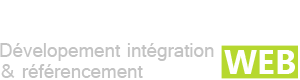
<style>
.page{position:relative;width:300px;height:80px;background:#ffffff}
.page>*{position:absolute;margin:0}
.t1{font:20.8px "Raavi";color:#c3c3c3}
.t2{font:32.9px "SegoeUI-Bold";color:#ffffff}
</style>
<div class="page">
<p class="t1" style="left:0px;top:43px;width:214px;height:18px">Dévelopement intégration</p>
<p class="t2" style="left:224px;top:50px;width:71px;height:24px">WEB</p>
<p class="t1" style="left:1px;top:64px;width:142px;height:14px">&amp; référencement</p>
</div>
